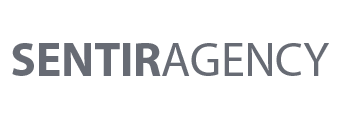
<style>
.page{position:relative;width:340px;height:120px;background:#ffffff}
.page>*{position:absolute;margin:0}
.t1{font:48.2px "MyriadPro-Bold";letter-spacing:-0.01em;color:#676b74}
.t2{font:48.2px "MyriadPro-Regular";letter-spacing:-0.01em;color:#676b74}
</style>
<div class="page">
<p class="t1" style="left:12px;top:43px;width:317px;height:33px">SENTIR<span class="t2">AGENCY</span></p>
</div>
